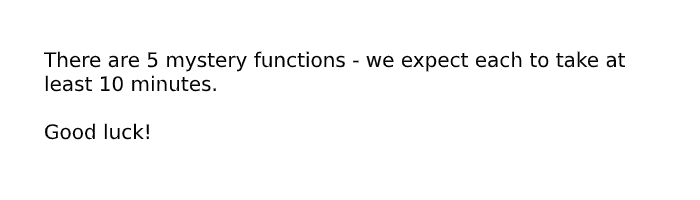
<style>
.page{position:relative;width:700px;height:200px;background:#ffffff}
.page>*{position:absolute;margin:0}
.t1{font:20px "DejaVuSans";color:#000000}
</style>
<div class="page">
<p class="t1" style="left:43px;top:51px;width:583px;height:89px">There are 5 mystery functions - we expect each to take at<br>least 10 minutes.<br><br>Good luck!</p>
</div>
